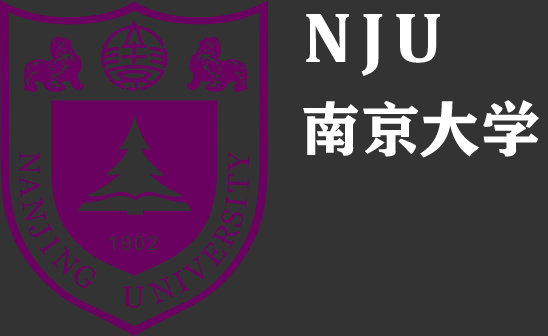
<style>
.page{position:relative;width:548px;height:336px;background:#333333}
.page>*{position:absolute;margin:0}
.t1{font:72px "Cambria-Bold";letter-spacing:0.12em;color:#ffffff}
.t2{font:60px "FZCHSJW--GB1-0";color:#ffffff}
</style>
<div class="page">
<p class="t1" style="left:306px;top:14px;width:134px;height:62px">NJU</p>
<p class="t2" style="left:303px;top:100px;width:236px;height:58px">南京大学</p>
</div>
